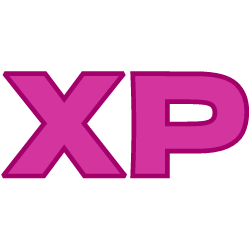
<style>
.page{position:relative;width:250px;height:250px;background:#ffffff}
.page>*{position:absolute;margin:0}
.t1{font:141px "DelaGothicOne-Regular";color:#d3349d}
</style>
<div class="page">
<p class="t1" style="left:1px;top:71px;width:248px;height:108px">XP</p>
</div>
